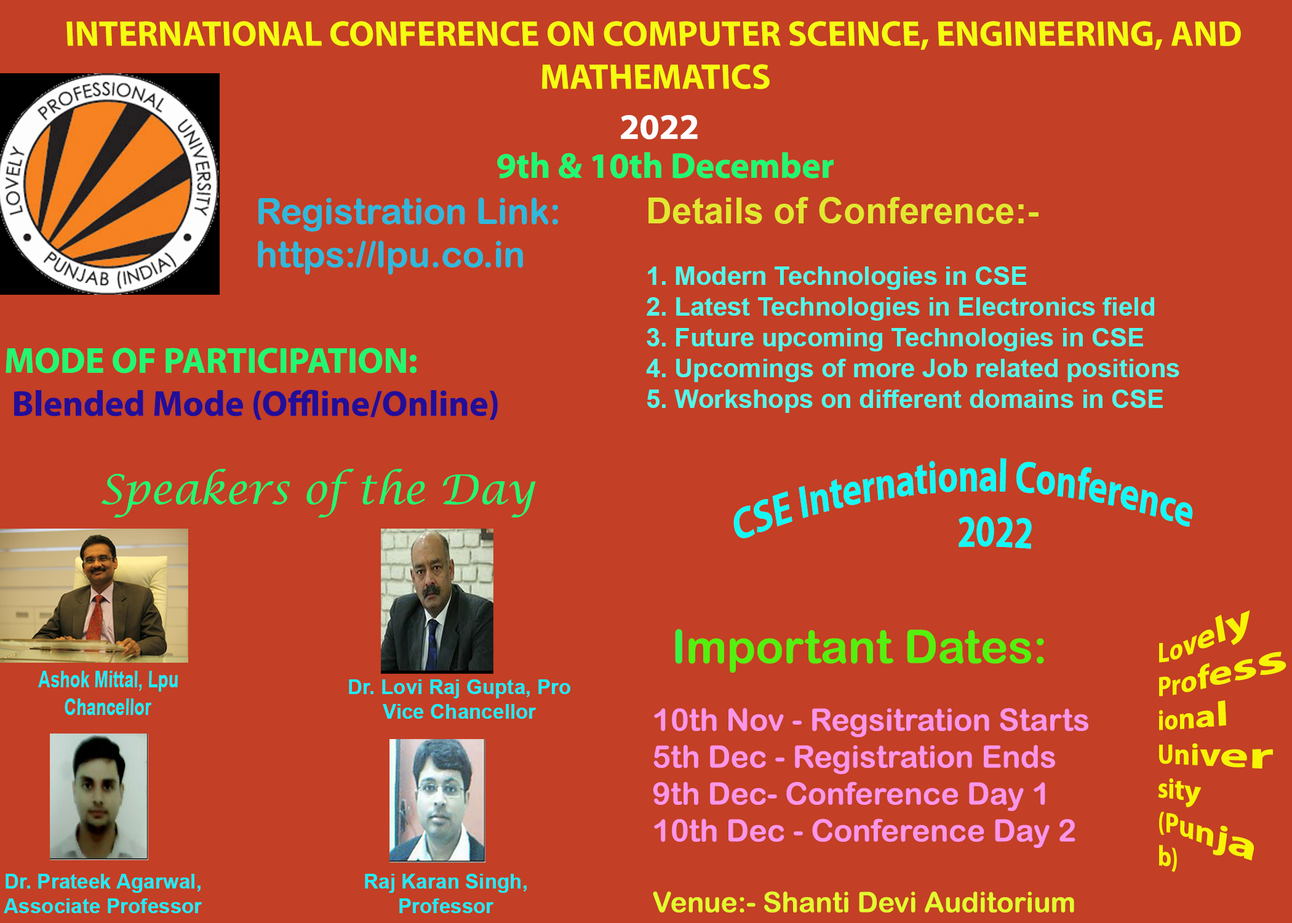
<style>
.page{position:relative;width:1292px;height:923px;background:#c33f25}
.page>*{position:absolute;margin:0}
.t1{font:35.9px "MyriadPro-Bold";color:#f5fd12}
.t2{font:35.9px "MyriadPro-Bold";color:#ffffff}
.t3{font:35.9px "MyriadPro-Bold";color:#21f872}
.t4{font:35.9px "ArialRoundedMTBold";color:#2fb9dc}
.t5{font:25.6px "Arial-BoldMT";color:#4ff8ea}
.t6{font:35.9px "Arial-BoldMT";color:#e1e731}
.t7{font:35.9px "MyriadPro-Bold";color:#220e98}
.t8{font:46.1px "MyriadPro-Bold";color:#15f9f6;scale:0.69 1}
.t9{font:41px "LucidaCalligraphy-Italic";color:#21f872}
.t10{font:28.2px "MyriadPro-Bold";color:#f7f405;scale:0.84 1}
.t11{font:30.8px "ArialRoundedMTBold";color:#fa96e8}
.t12{font:25.6px "ArialRoundedMTBold";color:#2fb9dc}
.t13{font:46.1px "ArialRoundedMTBold";color:#38f149}
.t14{font:46.1px "ArialRoundedMTBold";color:#54f00f}
.t15{font:28.2px "ArialRoundedMTBold";color:#e2fc30}
.t16{font:23.1px "Arial-BoldMT";color:#1cedfa;scale:0.73 1}
.t17{font:20.5px "Arial-BoldMT";color:#1cedfa}
</style>
<div class="page">
<p class="t1" style="left:66px;top:21px;width:1175px;height:68px;text-align:center">INTERNATIONAL CONFERENCE ON COMPUTER SCEINCE, ENGINEERING, AND MATHEMATICS</p>
<p class="t2" style="left:621px;top:115px;width:77px;height:25px">2022</p>
<p class="t3" style="left:497px;top:152px;width:337px;height:26px">9th &amp; 10th December</p>
<p class="t4" style="left:258px;top:197px;width:300px;height:78px">Registration Link:<br>https://lpu.co.in</p>
<p class="t5" style="left:646px;top:197px;width:533px;height:216px"><span class="t6">Details of Conference:-<br><br></span>1. Modern Technologies in CSE<br>2. Latest Technologies in Electronics field<br>3. Future upcoming Technologies in CSE<br>4. Upcomings of more Job related positions<br>5. Workshops on different domains in CSE</p>
<p class="t7" style="left:6px;top:348px;width:492px;height:72px"><span class="t3">MODE OF PARTICIPATION:<br></span>Blended Mode (Offline/Online)</p>
<p class="t8" style="left:733px;top:458px;width:460px;height:91px;rotate:6deg">CSE International Conference<br>        2022</p>
<p class="t9" style="left:101px;top:469px;width:435px;height:48px">Speakers of the Day</p>
<p class="t10" style="left:1158px;top:610px;width:129px;height:262px">Lovely Professional University (Punjab)</p>
<p class="t11" style="left:653px;top:629px;width:435px;height:283px"><span class="t12">   </span><span class="t13">I</span><span class="t14">mportant Dates:<br><br></span>10th Nov - Regsitration Starts<br>5th Dec - Registration Ends<br>9th Dec- Conference Day 1<br>10th Dec - Conference Day 2<br><br><span class="t15">Venue:- Shanti Devi Auditorium</span></p>
<p class="t16" style="left:38px;top:671px;width:140px;height:44px;text-align:center">Ashok Mittal, Lpu Chancellor</p>
<p class="t17" style="left:349px;top:679px;width:221px;height:40px;text-align:center">Dr. Lovi Raj Gupta, Pro Vice Chancellor</p>
<p class="t17" style="left:4px;top:874px;width:198px;height:39px;text-align:center">Dr. Prateek Agarwal, Associate Professor</p>
<p class="t17" style="left:365px;top:874px;width:162px;height:39px;text-align:center">Raj Karan Singh, Professor</p>
</div>
